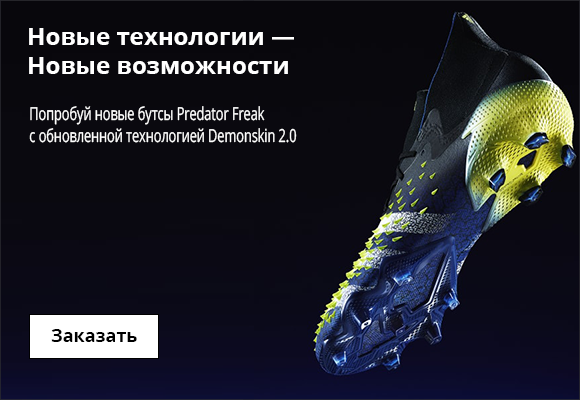
<style>
.page{position:relative;width:580px;height:400px}
.page>*{position:absolute;margin:0}
.t1{font:24px "OpenSans-Bold";color:#ffffff}
.t2{font:18px "OpenSans";color:#ffffff;scale:0.7 1}
.t3{font:18px "OpenSans-Bold";color:#000000}
</style>
<div class="page">
<p class="t1" style="left:29px;top:28px;width:265px;height:46px">Новые технологии —<br>Новые возможности</p>
<p class="t2" style="left:29px;top:106px;width:268px;height:37px">Попробуй новые бутсы Predator Freak<br>с обновленной технологией Demonskin 2.0</p>
<p class="t3" style="left:51px;top:329px;width:86px;height:13px">Заказать</p>
</div>
